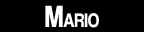
<style>
.page{position:relative;width:144px;height:32px;background:#000000}
.page>*{position:absolute;margin:0}
.t1{font:32px "CoolveticaRg-Bold";color:#ffffff;font-variant:small-caps;scale:0.83 1}
</style>
<div class="page">
<p class="t1" style="left:45px;top:5px;width:54px;height:23px">Mario</p>
</div>
